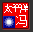
<style>
.page{position:relative;width:33px;height:32px;background:#f20000}
.page>*{position:absolute;margin:0}
.t1{font:10.4px "SimSun";letter-spacing:-0.25em;color:#ffffff}
.t2{font:11.7px "SimSun";color:#ffffff}
</style>
<div class="page">
<p class="t1" style="left:4px;top:4px;width:24px;height:9px">太平洋</p>
<p class="t2" style="left:16px;top:15px;width:11px;height:12px">冯</p>
</div>
